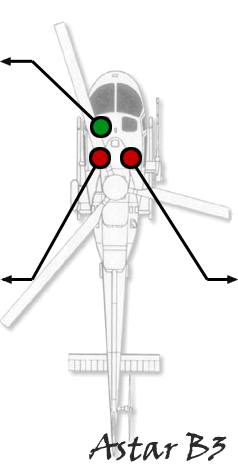
<style>
.page{position:relative;width:238px;height:475px;background:#ffffff}
.page>*{position:absolute;margin:0}
.t1{font:33.3px "VinerHandITC";color:#2a2a2a}
</style>
<div class="page">
<p class="t1" style="left:89px;top:432px;width:138px;height:30px">Astar B3</p>
</div>
